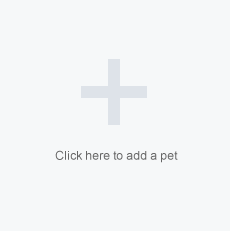
<style>
.page{position:relative;width:230px;height:231px;background:#f6f8f9}
.page>*{position:absolute;margin:0}
.t1{font:12px "ArialMT";color:#666666}
</style>
<div class="page">
<p class="t1" style="left:55px;top:150px;width:123px;height:13px">Click here to add a pet</p>
</div>
